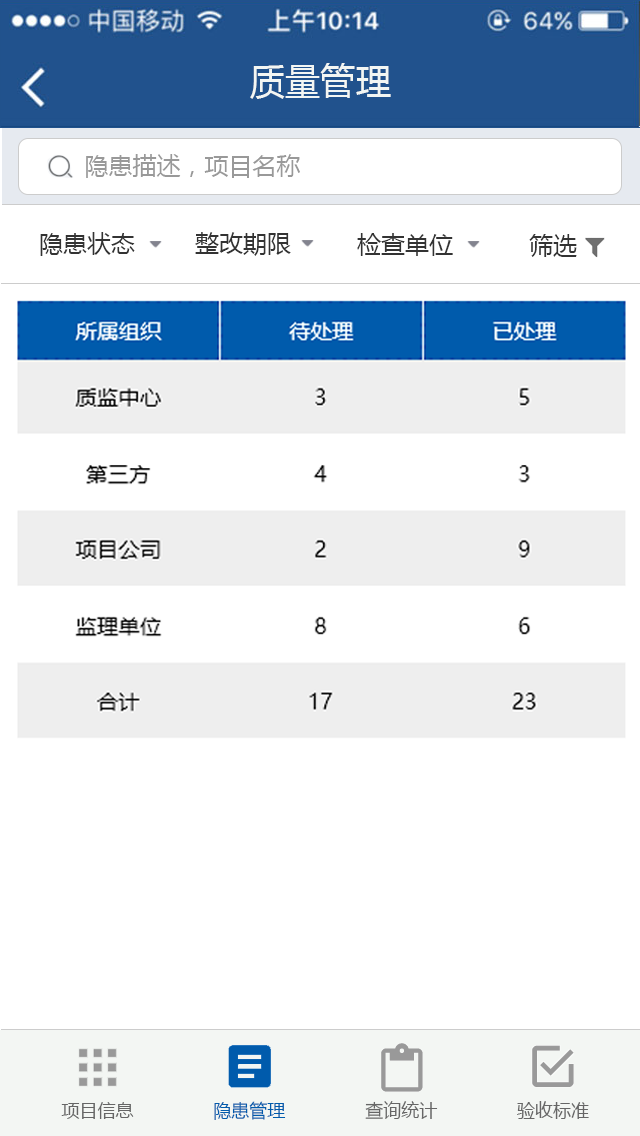
<style>
.page{position:relative;width:640px;height:1136px;background:#ffffff}
.page>*{position:absolute;margin:0}
.t1{font:36px "MicrosoftYaHei";color:#f3f6f3}
.t2{font:24px "MicrosoftYaHei";color:#999999}
.t3{font:24px "MicrosoftYaHei";color:#333333}
.t4{font:18px "MicrosoftYaHei";color:#666666}
.t5{font:18px "MicrosoftYaHei";color:#005bac}
</style>
<div class="page">
<p class="t1" style="left:250px;top:63px;width:141px;height:36px">质量管理</p>
<p class="t2" style="left:86px;top:154px;width:214px;height:24px">隐患描述，项目名称</p>
<p class="t3" style="left:40px;top:232px;width:95px;height:24px">隐患状态</p>
<p class="t3" style="left:195px;top:232px;width:96px;height:24px">整改期限</p>
<p class="t3" style="left:357px;top:233px;width:96px;height:23px">检查单位</p>
<p class="t3" style="left:529px;top:234px;width:48px;height:23px">筛选</p>
<p class="t4" style="left:61px;top:1101px;width:528px;height:19px">项目信息               <span class="t5">隐患管理</span>               查询统计               验收标准</p>
</div>
